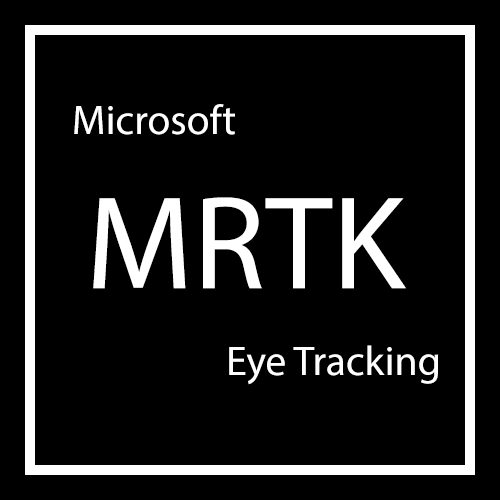
<style>
.page{position:relative;width:500px;height:500px;background:#000000}
.page>*{position:absolute;margin:0}
.t1{font:41.7px "MyriadPro-Regular";color:#ffffff}
.t2{font:133.3px "MyriadPro-Regular";color:#ffffff}
</style>
<div class="page">
<p class="t1" style="left:74px;top:104px;width:161px;height:31px">Microsoft</p>
<p class="t2" style="left:93px;top:197px;width:313px;height:92px">MRTK</p>
<p class="t1" style="left:229px;top:345px;width:210px;height:40px">Eye Tracking</p>
</div>
